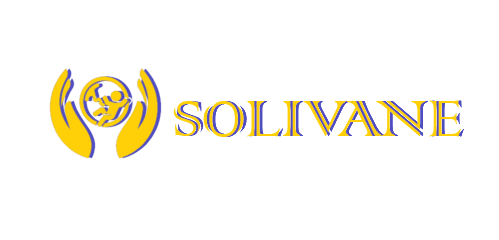
<style>
.page{position:relative;width:499px;height:240px;background:#ffffff}
.page>*{position:absolute;margin:0}
.t1{font:66.7px "ColonnaMT";color:#ffd007}
</style>
<div class="page">
<p class="t1" style="left:173px;top:100px;width:288px;height:37px">SOLIVANE</p>
</div>
